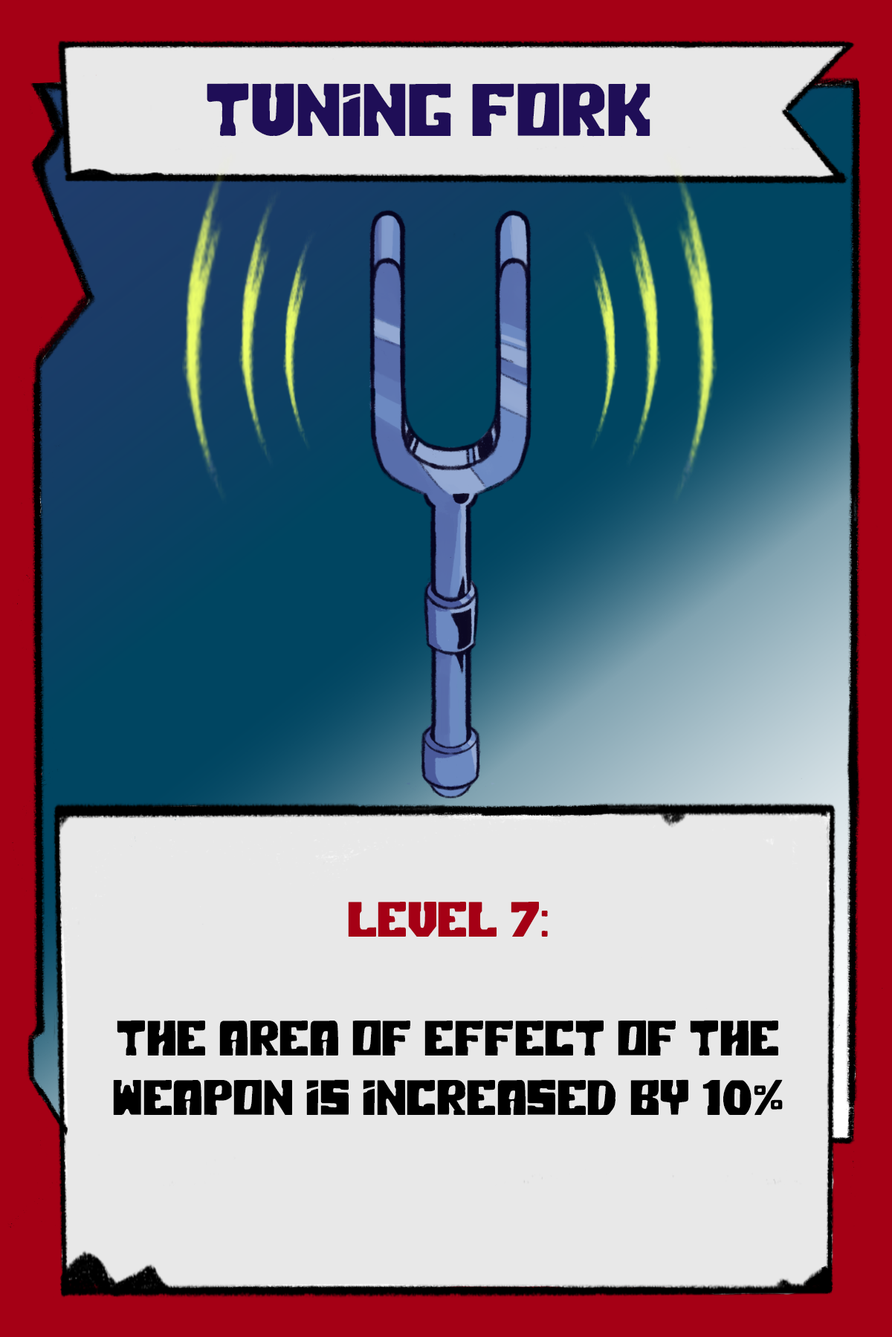
<style>
.page{position:relative;width:892px;height:1337px;background:#e8e8e8}
.page>*{position:absolute;margin:0}
.t1{font:74.3px "PolarPress";color:#1f0e57}
.t2{font:49.5px "PolarPress";color:#000000}
.t3{font:49.5px "PolarPress";color:#a50015}
</style>
<div class="page">
<p class="t1" style="left:207px;top:83px;width:443px;height:54px">TUNING FORK</p>
<p class="t2" style="left:113px;top:902px;width:669px;height:214px;text-align:center"><span class="t3">LEVEL 7:<br><br></span>The Area Of Effect of the weapon is increased by 10%</p>
</div>
